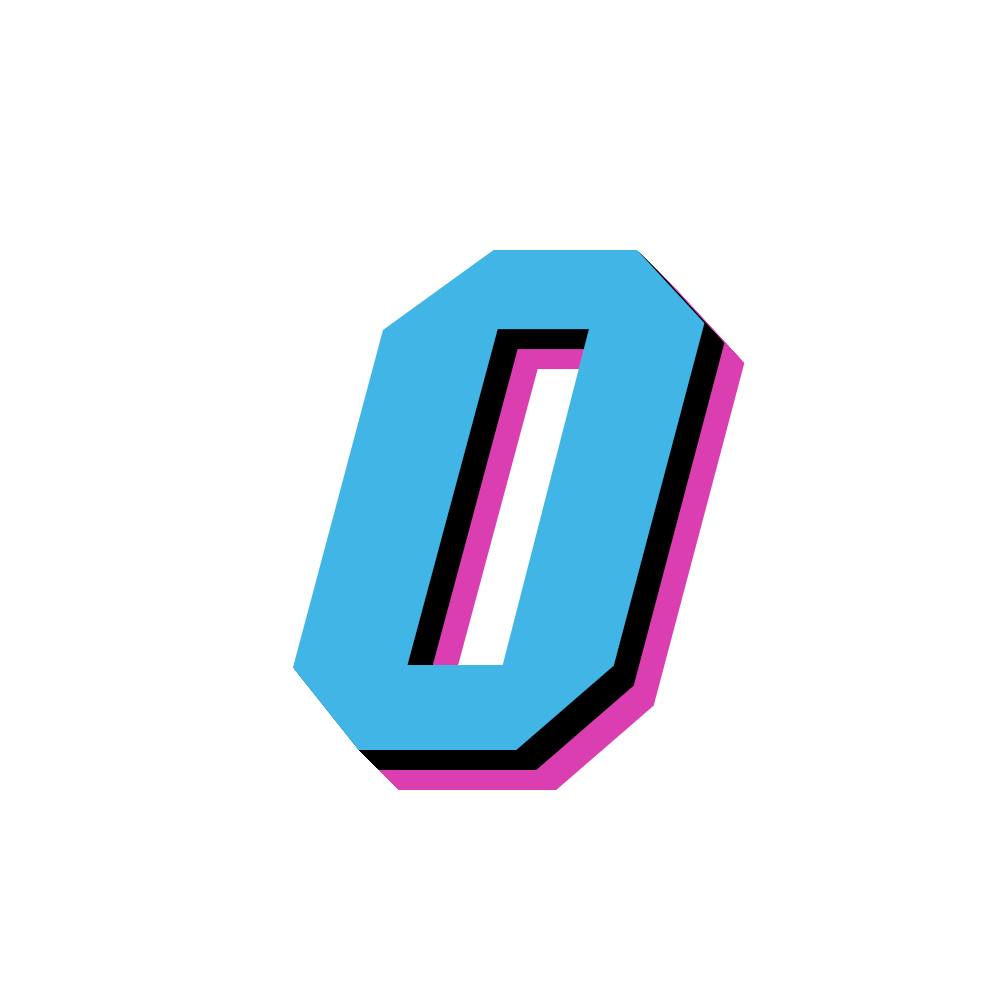
<style>
.page{position:relative;width:1000px;height:1000px;background:#ffffff}
.page>*{position:absolute;margin:0}
.t1{font:625px "NBAHeat";color:#41b6e6}
</style>
<div class="page">
<p class="t1" style="left:293px;top:250px;width:412px;height:500px">0</p>
</div>
